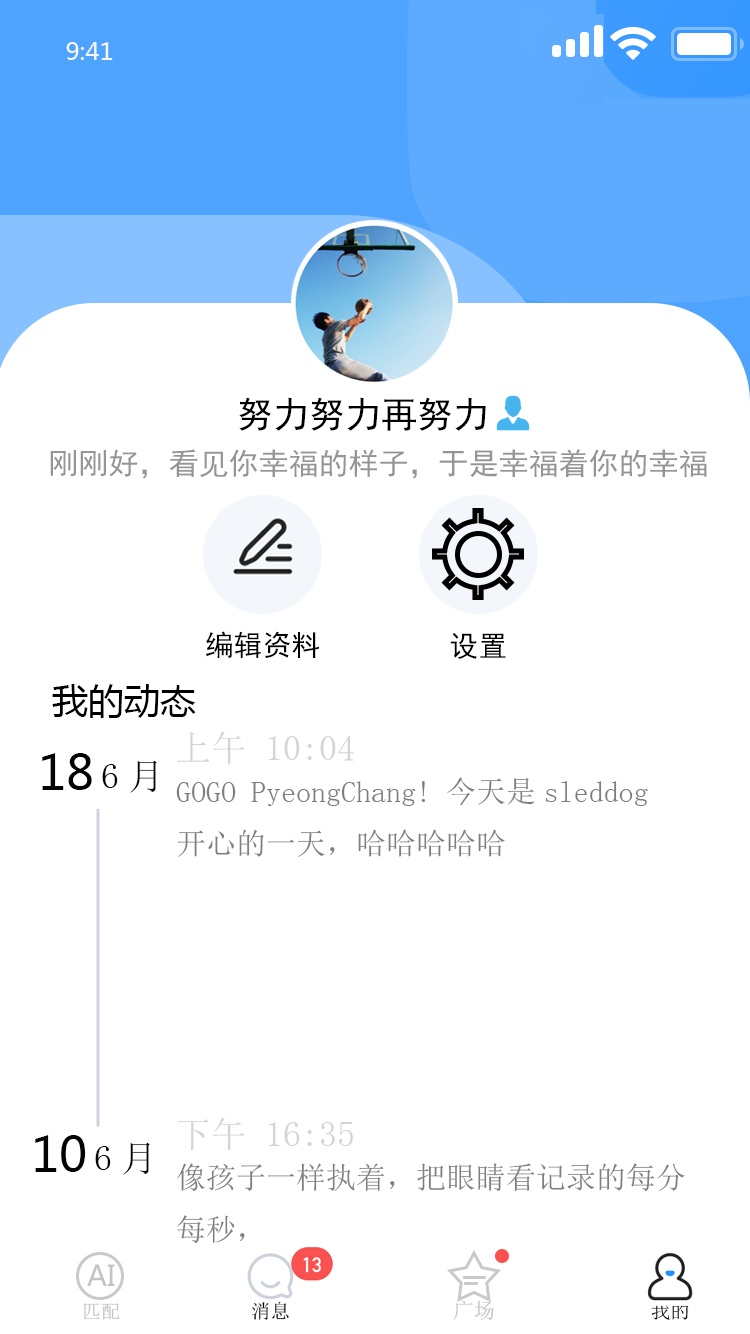
<style>
.page{position:relative;width:750px;height:1334px;background:#ffffff}
.page>*{position:absolute;margin:0}
.t1{font:24px "MicrosoftYaHei";color:#f7f7f7}
.t2{font:36px "SimHei";color:#000000}
.t3{font:30px "SimHei";color:#959595}
.t4{font:28.7px "SimHei";color:#000000}
.t5{font:36px "MicrosoftYaHei";color:#000000}
.t6{font:36px "NSimSun";color:#d4d4d7}
.t7{font:48px "MicrosoftYaHei";color:#030303}
.t8{font:36px "NSimSun";color:#030303}
.t9{font:30px "NSimSun";color:#7e7e7e}
.t10{font:28.5px "MicrosoftYaHei";color:#c4c2c2}
.t11{font:19.4px "NSimSun";color:#030303}
.t12{font:21.2px "NSimSun";color:#c4c2c2}
.t13{font:19.5px "NSimSun";color:#030303}
.t14{font:19px "NSimSun";color:#c4c2c2}
</style>
<div class="page">
<p class="t1" style="left:66px;top:42px;width:47px;height:18px">9:41</p>
<p class="t2" style="left:239px;top:397px;width:247px;height:34px">努力努力再努力</p>
<p class="t3" style="left:50px;top:449px;width:657px;height:30px">刚刚好，看见你幸福的样子，于是幸福着你的幸福</p>
<p class="t4" style="left:206px;top:631px;width:113px;height:27px">编辑资料</p>
<p class="t4" style="left:450px;top:632px;width:56px;height:27px">设置</p>
<p class="t5" style="left:52px;top:684px;width:144px;height:34px">我的动态</p>
<p class="t6" style="left:176px;top:731px;width:178px;height:34px">上午 10:04</p>
<p class="t7" style="left:42px;top:753px;width:50px;height:37px">18</p>
<p class="t8" style="left:102px;top:760px;width:55px;height:33px">6月</p>
<p class="t9" style="left:176px;top:777px;width:472px;height:80px">GOGO PyeongChang! 今天是sleddog<br>开心的一天，哈哈哈哈哈</p>
<p class="t6" style="left:177px;top:1117px;width:176px;height:34px">下午 16:35</p>
<p class="t7" style="left:35px;top:1135px;width:51px;height:37px">10</p>
<p class="t8" style="left:95px;top:1142px;width:55px;height:33px">6月</p>
<p class="t9" style="left:177px;top:1163px;width:508px;height:80px">像孩子一样执着，把眼睛看记录的每分<br>每秒，</p>
<p class="t10" style="left:87px;top:1264px;width:28px;height:22px">AI</p>
<p class="t11" style="left:252px;top:1301px;width:37px;height:19px">消息</p>
<p class="t12" style="left:453px;top:1300px;width:41px;height:21px">广场</p>
<p class="t13" style="left:651px;top:1302px;width:38px;height:18px">我的</p>
<p class="t14" style="left:84px;top:1303px;width:36px;height:17px">匹配</p>
</div>
